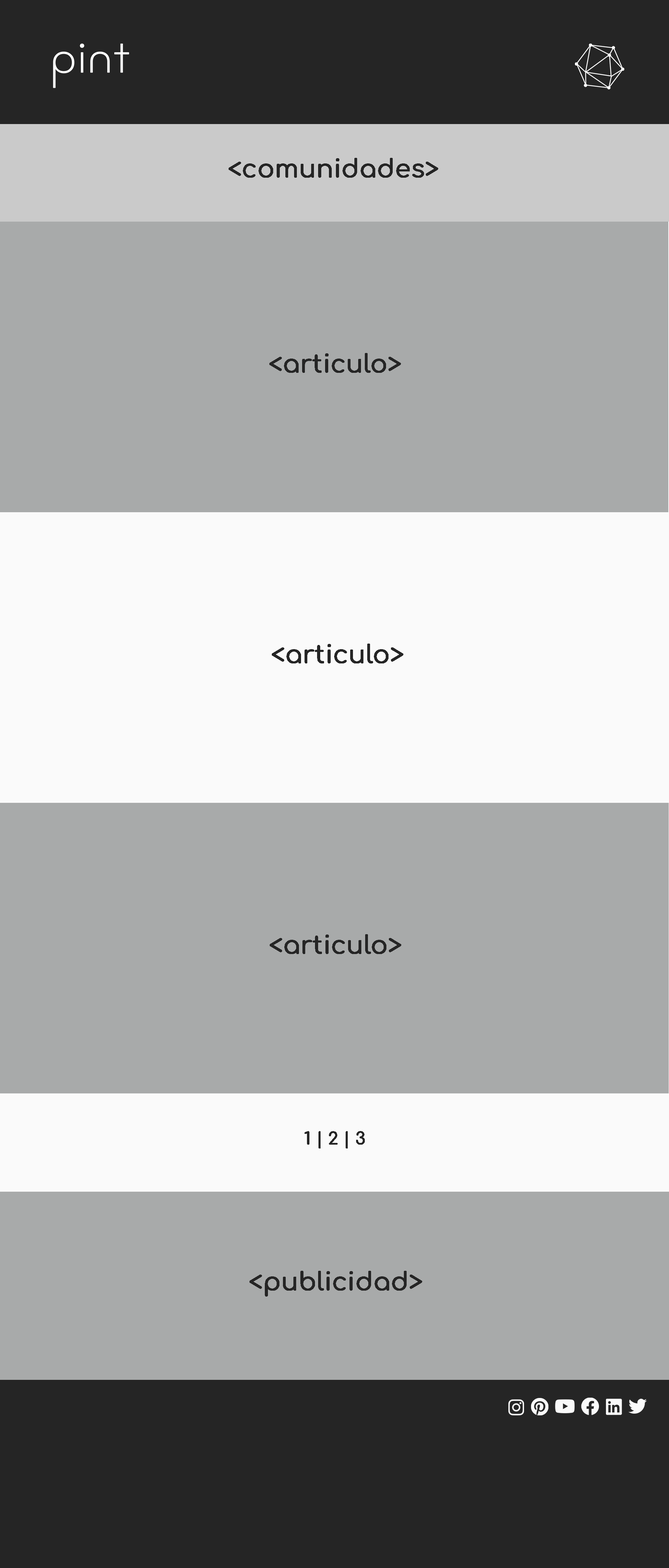
<style>
.page{position:relative;width:669px;height:1568px;background:#a8aaaa}
.page>*{position:absolute;margin:0}
.t1{font:25.1px "Comfortaa-Medium";letter-spacing:-0.01em;color:#252525;font-weight:bold}
.t2{font:16.7px "Comfortaa-Medium";letter-spacing:-0.01em;color:#252525;font-weight:bold}
</style>
<div class="page">
<p class="t1" style="left:229px;top:158px;width:209px;height:20px">&lt;comunidades&gt;</p>
<p class="t1" style="left:269px;top:353px;width:132px;height:20px">&lt;articulo&gt;</p>
<p class="t1" style="left:272px;top:644px;width:131px;height:19px">&lt;articulo&gt;</p>
<p class="t1" style="left:270px;top:934px;width:131px;height:20px">&lt;articulo&gt;</p>
<p class="t2" style="left:305px;top:1131px;width:60px;height:17px">1 | 2 | 3</p>
<p class="t1" style="left:249px;top:1271px;width:173px;height:26px">&lt;publicidad&gt;</p>
</div>
